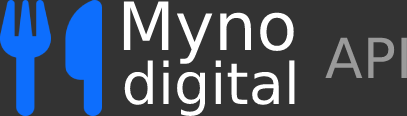
<style>
.page{position:relative;width:407px;height:116px;background:#333333}
.page>*{position:absolute;margin:0}
.t1{font:66.6px "DejaVuSans";color:#ffffff}
.t2{font:55.2px "DejaVuSans";color:#9a9a9a}
.t3{font:57.3px "DejaVuSans";color:#ffffff}
</style>
<div class="page">
<p class="t1" style="left:123px;top:1px;width:171px;height:63px">Myno</p>
<p class="t2" style="left:325px;top:37px;width:82px;height:41px">API</p>
<p class="t3" style="left:124px;top:60px;width:171px;height:56px">digital</p>
</div>
